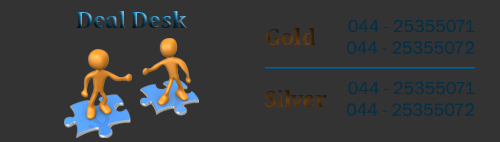
<style>
.page{position:relative;width:500px;height:142px;background:#333333}
.page>*{position:absolute;margin:0}
.t1{font:24px "Cambria-Bold"}
.t2{font:18px "FranklinGothic-Book";color:#072e43}
.t3{font:24px "Cambria-Bold";color:#4e2f0e}
</style>
<div class="page">
<p class="t1" style="left:77px;top:11px;width:110px;height:17px">Deal Desk</p>
<p class="t1" style="left:266px;top:28px;width:50px;height:17px">Gold</p>
<p class="t2" style="left:346px;top:19px;width:129px;height:35px;text-align:right">044 - 25355071<br>044 - 25355072</p>
<p class="t2" style="left:346px;top:81px;width:129px;height:35px;text-align:right">044 - 25355071<br>044 - 25355072</p>
<p class="t3" style="left:265px;top:90px;width:62px;height:17px">Silver</p>
</div>
